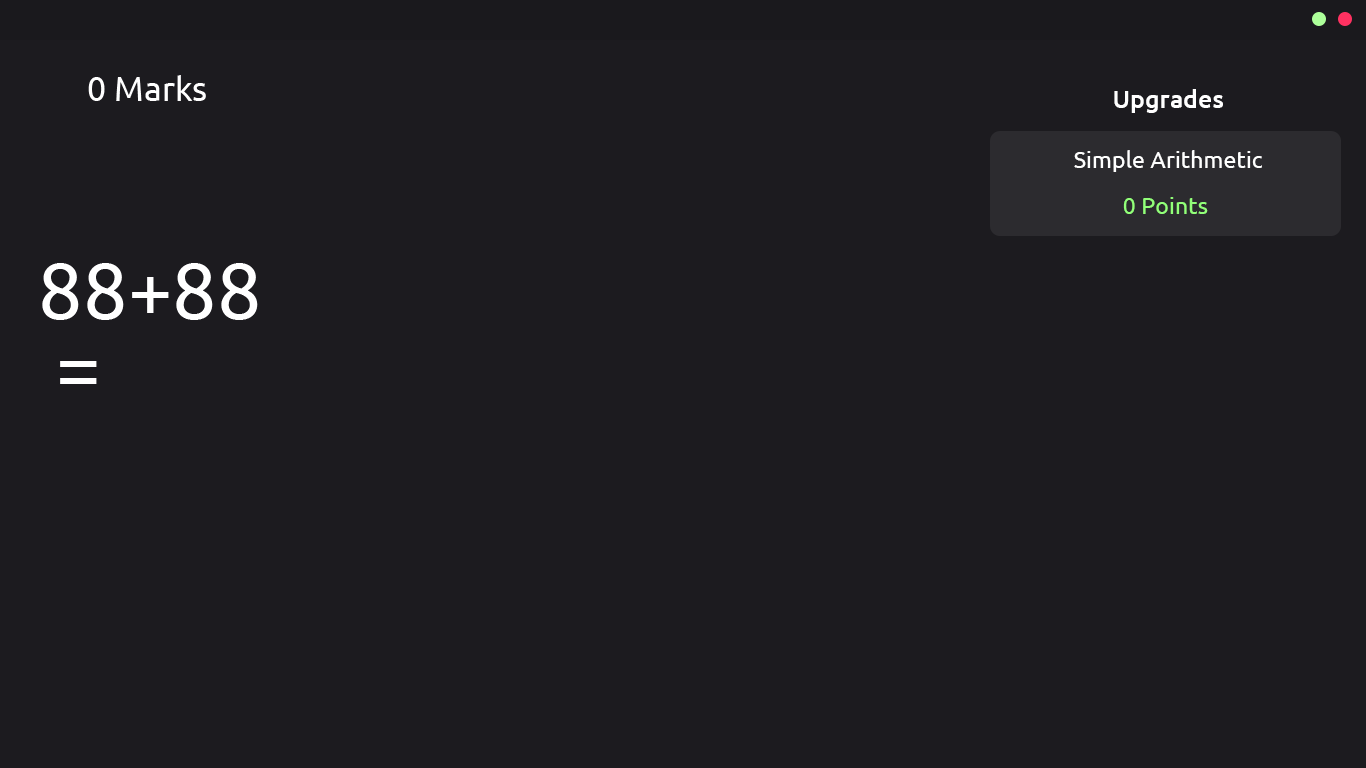
<style>
.page{position:relative;width:1366px;height:768px;background:#1c1b1f}
.page>*{position:absolute;margin:0}
.t1{font:34px "Ubuntu";color:#ffffff}
.t2{font:25px "Ubuntu-Medium";color:#ffffff}
.t3{font:23.3px "Ubuntu";color:#ffffff}
.t4{font:23.3px "Ubuntu";color:#92ff79}
.t5{font:79.4px "Ubuntu";color:#ffffff}
</style>
<div class="page">
<p class="t1" style="left:88px;top:75px;width:118px;height:26px">0 Marks</p>
<p class="t2" style="left:1114px;top:89px;width:109px;height:24px">Upgrades</p>
<p class="t3" style="left:1074px;top:150px;width:188px;height:22px">Simple Arithmetic</p>
<p class="t4" style="left:1123px;top:197px;width:85px;height:17px">0 Points</p>
<p class="t5" style="left:42px;top:263px;width:216px;height:57px">88+88</p>
<p class="t5" style="left:60px;top:361px;width:37px;height:23px">=</p>
</div>
